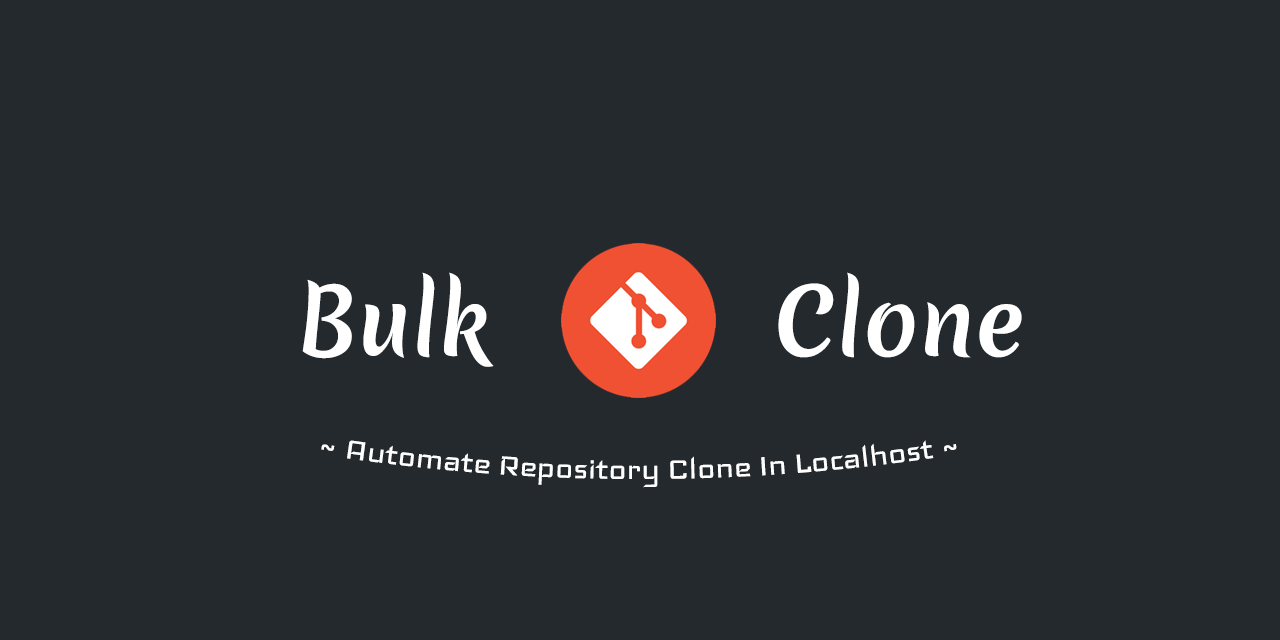
<style>
.page{position:relative;width:1280px;height:640px;background:#24292e}
.page>*{position:absolute;margin:0}
.t1{font:90px "MeriendaOne-Regular";color:#ffffff}
.t2{font:37px "Iceland-Regular";color:#ffffff}
</style>
<div class="page">
<p class="t1" style="left:302px;top:272px;width:192px;height:95px">Bulk</p>
<p class="t1" style="left:778px;top:272px;width:244px;height:86px">Clone</p>
<p class="t2" style="left:321px;top:440px;width:636px;height:48px">~ Automate Repository Clone In Localhost ~</p>
</div>
